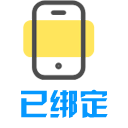
<style>
.page{position:relative;width:128px;height:128px;background:#ffffff}
.page>*{position:absolute;margin:0}
.t1{font:30px "HYk2gj";color:#0598ff}
</style>
<div class="page">
<p class="t1" style="left:21px;top:89px;width:87px;height:29px">已绑定</p>
</div>
